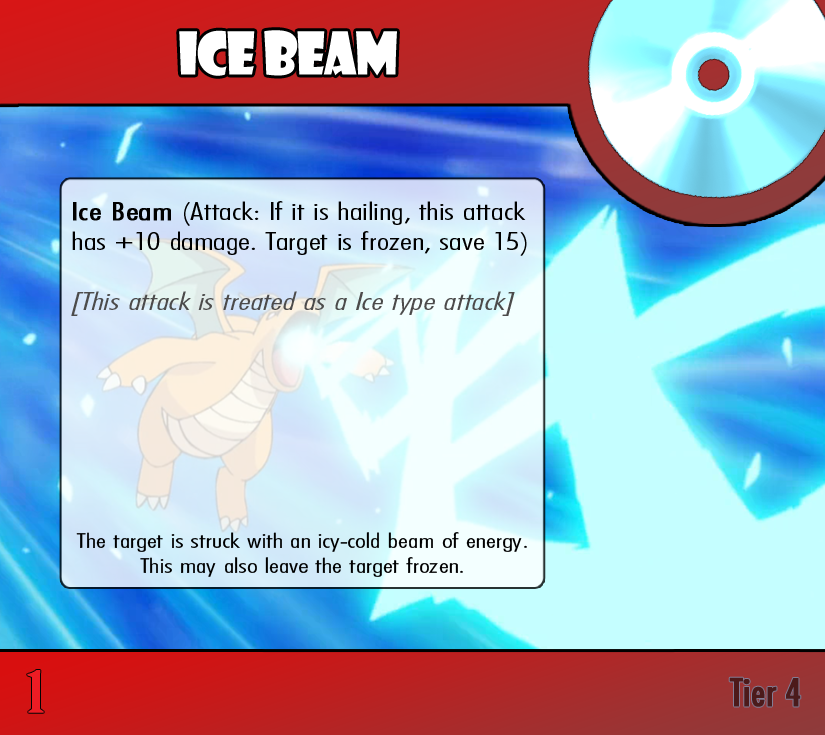
<style>
.page{position:relative;width:825px;height:735px}
.page>*{position:absolute;margin:0}
.t1{font:57.4px "ShowcardGothic-Reg";letter-spacing:-0.025em;color:#ffffff;scale:0.91 1}
.t2{font:25px "FuturaCondensedBQ-Light";color:#000000;scale:1.5 1}
.t3{font:25px "FuturaCondensedBQ-Light";color:#000000;font-weight:bold;scale:1.5 1}
.t4{font:25px "FuturaCondensedBQ-Light";color:#4c4b4b;font-style:italic;scale:1.5 1}
.t5{font:20.8px "FuturaCondensedBQ-Light";color:#000000;scale:1.5 1}
.t6{font:55.6px "BirchStd";color:#ed1c24;font-weight:bold;scale:1.5 1}
.t7{font:37.5px "Futura-Condensed-Normal";color:#4c1a1a;font-weight:bold}
</style>
<div class="page">
<p class="t1" style="left:179px;top:30px;width:218px;height:46px">Ice Beam</p>
<p class="t2" style="left:71px;top:201px;width:456px;height:115px"><span class="t3">Ice Beam </span>(Attack: If it is hailing, this attack has +10 damage. Target is frozen, save 15)<br><br><span class="t4">[This attack is treated as a Ice type attack]</span></p>
<p class="t5" style="left:76px;top:532px;width:451px;height:45px;text-align:center">The target is struck with an icy-cold beam of energy. This may also leave the target frozen.</p>
<p class="t6" style="left:27px;top:670px;width:17px;height:43px">1</p>
<p class="t7" style="left:729px;top:677px;width:72px;height:30px">Tier 4</p>
</div>
